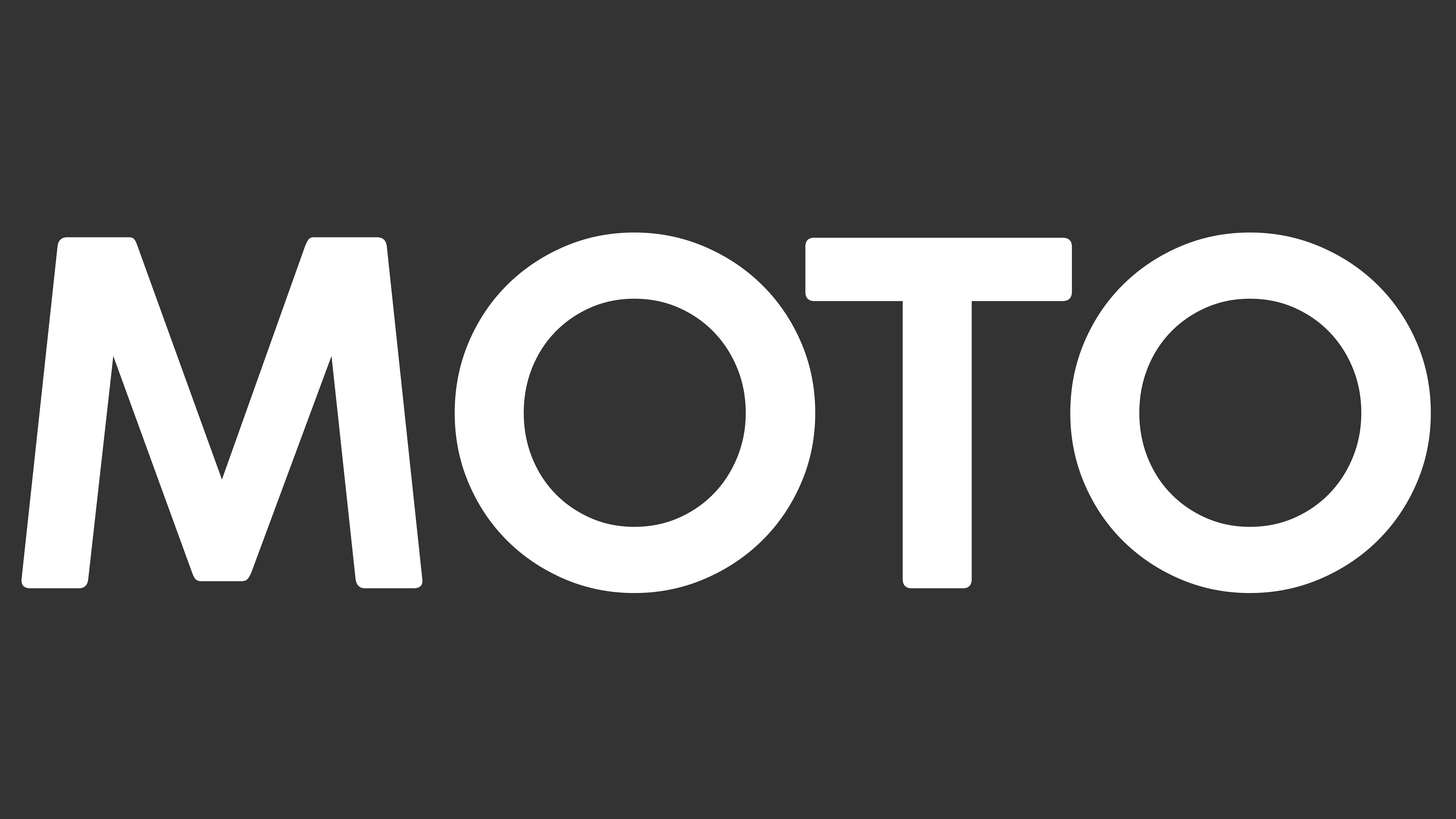
<style>
.page{position:relative;width:1456px;height:819px;background:#333333}
.page>*{position:absolute;margin:0}
.t1{font:472.4px "CocoGothic-Bold";color:#ffffff}
</style>
<div class="page">
<p class="t1" style="left:21px;top:232px;width:1410px;height:361px">MOTO</p>
</div>
